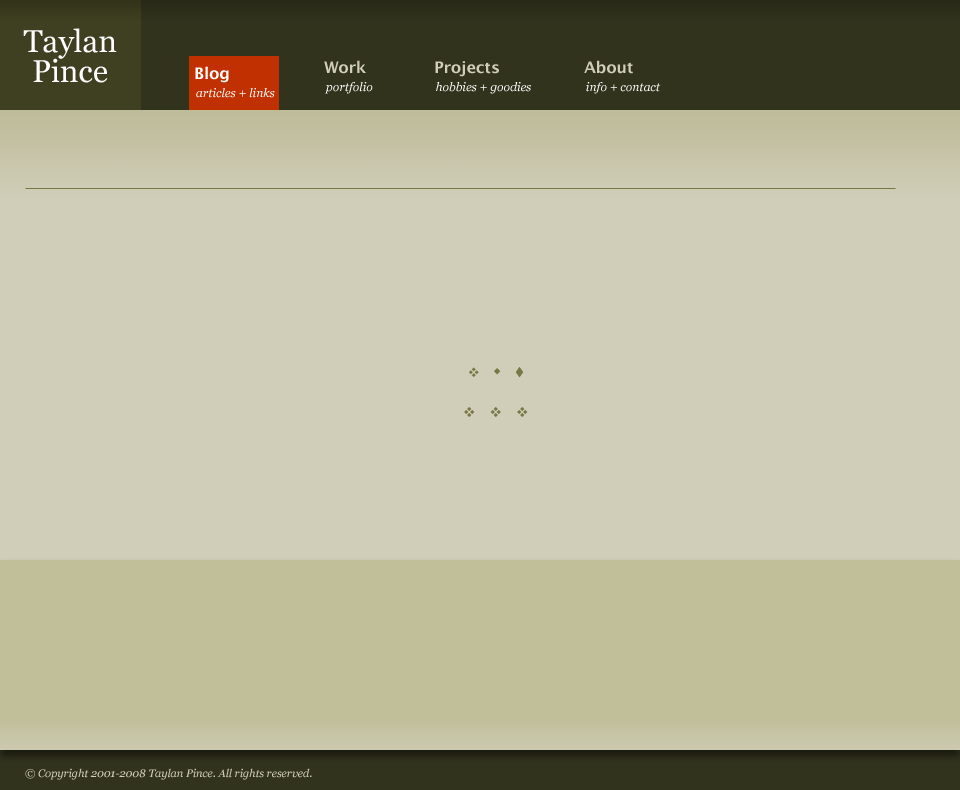
<style>
.page{position:relative;width:960px;height:790px;background:#d0cdb8}
.page>*{position:absolute;margin:0}
.t1{font:31.2px/30px "Georgia";color:#ffffff}
.t2{font:16px "LucidaGrande-Bold";color:#d0cdb8}
.t3{font:16px "LucidaGrande-Bold";color:#ffffff}
.t4{font:12px "Georgia-Italic";color:#ffffff}
.t5{font:11px "Georgia-Italic";color:#d0cdb8}
</style>
<div class="page">
<p class="t1" style="left:23px;top:28px;width:94px;height:55px;text-align:center">Taylan<br>Pince</p>
<p class="t2" style="left:324px;top:60px;width:42px;height:14px">Work</p>
<p class="t2" style="left:435px;top:61px;width:64px;height:16px">Projects</p>
<p class="t2" style="left:584px;top:60px;width:49px;height:14px">About</p>
<p class="t3" style="left:195px;top:66px;width:34px;height:17px">Blog</p>
<p class="t4" style="left:196px;top:88px;width:79px;height:10px">articles + links</p>
<p class="t4" style="left:324px;top:82px;width:49px;height:12px">portfolio</p>
<p class="t4" style="left:436px;top:82px;width:95px;height:12px">hobbies + goodies</p>
<p class="t4" style="left:586px;top:82px;width:75px;height:12px">info + contact</p>
<p class="t5" style="left:25px;top:768px;width:287px;height:12px">© Copyright 2001-2008 Taylan Pince. All rights reserved.</p>
</div>
